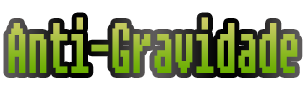
<style>
.page{position:relative;width:305px;height:100px;background:#ffffff}
.page>*{position:absolute;margin:0}
.t1{font:69.7px "Fixedsys";font-weight:bold;scale:0.48 1}
</style>
<div class="page">
<p class="t1" style="left:8px;top:17px;width:290px;height:56px">Anti-Gravidade</p>
</div>
